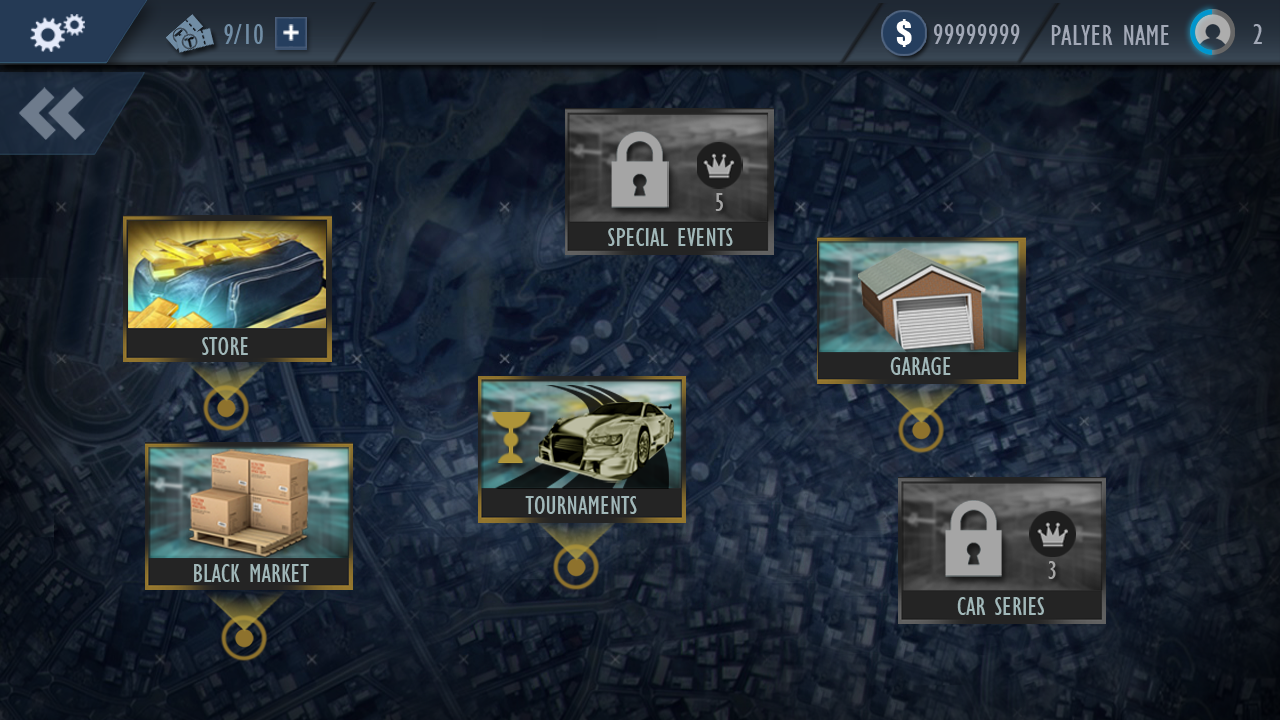
<style>
.page{position:relative;width:1280px;height:720px}
.page>*{position:absolute;margin:0}
.t1{font:27.2px "GillSansMT-Condensed";color:#a5a5a5}
.t2{font:27.2px "GillSansMT-Condensed";color:#a1b8b9}
</style>
<div class="page">
<p class="t1" style="left:715px;top:193px;width:8px;height:18px">5</p>
<p class="t2" style="left:608px;top:228px;width:125px;height:18px">SPECIAL EVENTS</p>
<p class="t2" style="left:202px;top:337px;width:46px;height:18px">STORE</p>
<p class="t2" style="left:890px;top:357px;width:61px;height:18px">GARAGE</p>
<p class="t2" style="left:525px;top:496px;width:112px;height:18px">TOURNAMENTS</p>
<p class="t2" style="left:194px;top:564px;width:115px;height:18px">BLACK MARKET</p>
<p class="t1" style="left:1048px;top:561px;width:8px;height:18px">3</p>
<p class="t2" style="left:957px;top:597px;width:87px;height:18px">CAR SERIES</p>
</div>
